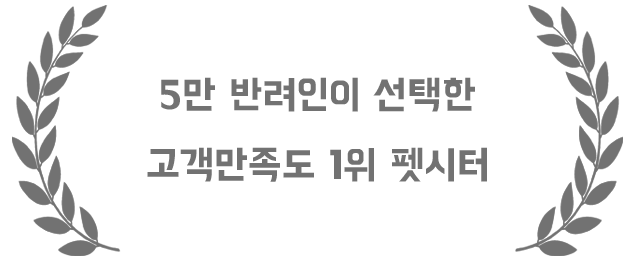
<style>
.page{position:relative;width:640px;height:265px;background:#ffffff}
.page>*{position:absolute;margin:0}
.t1{font:40px "BMHANNAPro";color:#727272}
</style>
<div class="page">
<p class="t1" style="left:147px;top:77px;width:340px;height:105px;text-align:center">5만 반려인이 선택한<br>고객만족도 1위 펫시터</p>
</div>
